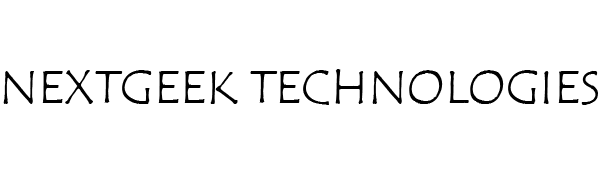
<style>
.page{position:relative;width:600px;height:175px;background:#ffffff}
.page>*{position:absolute;margin:0}
.t1{font:48px "TempusSansITC";color:#000000}
</style>
<div class="page">
<p class="t1" style="left:3px;top:69px;width:595px;height:36px">NEXTGEEK TECHNOLOGIES</p>
</div>
